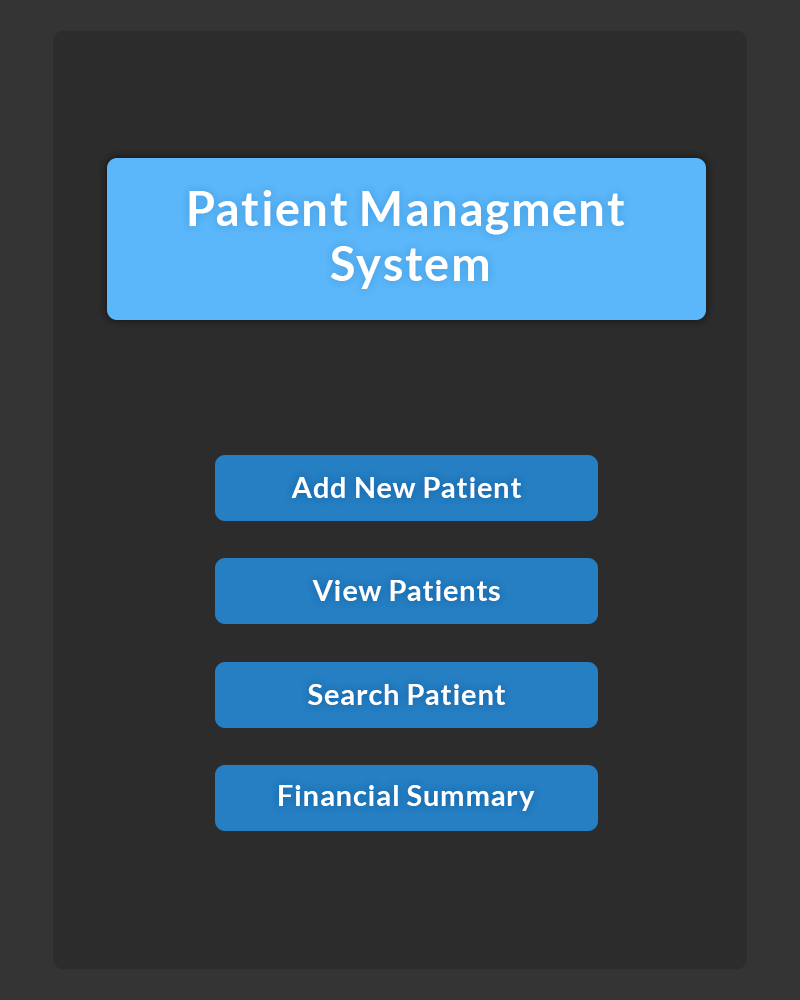
<style>
.page{position:relative;width:800px;height:1000px;background:#2c2c2c}
.page>*{position:absolute;margin:0}
.t1{font:47.5px/55.3px "Lato-Bold";letter-spacing:0.025em;color:#ffffff}
.t2{font:29px "Lato-Bold";letter-spacing:0.025em;color:#ffffff}
</style>
<div class="page">
<p class="t1" style="left:189px;top:190px;width:436px;height:99px;text-align:center">Patient Managment <br>System</p>
<p class="t2" style="left:291px;top:477px;width:231px;height:21px">Add New Patient</p>
<p class="t2" style="left:312px;top:580px;width:188px;height:21px">View Patients</p>
<p class="t2" style="left:308px;top:684px;width:198px;height:21px">Search Patient</p>
<p class="t2" style="left:279px;top:785px;width:256px;height:26px">Financial Summary</p>
</div>
